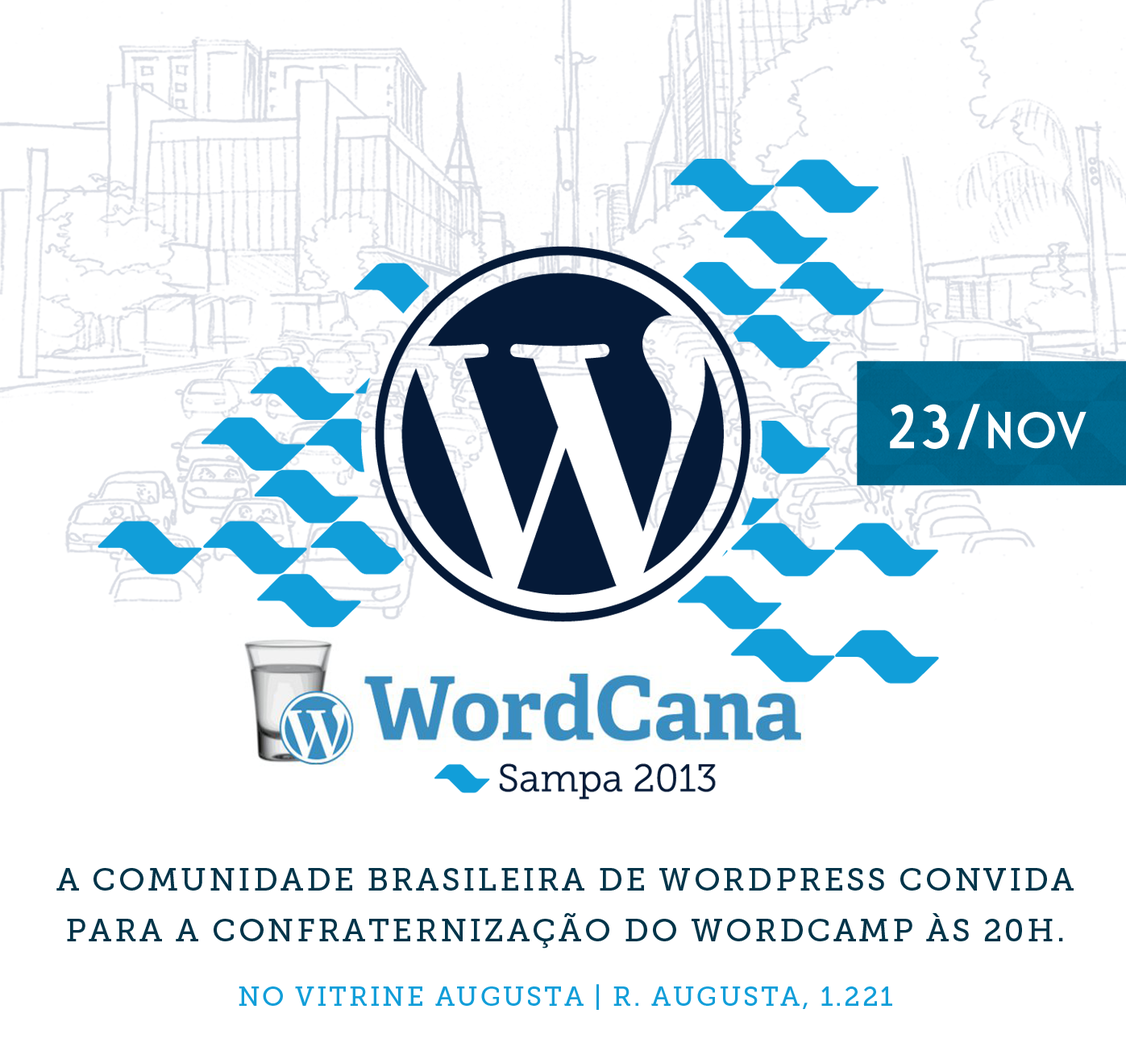
<style>
.page{position:relative;width:1126px;height:1059px;background:#ffffff}
.page>*{position:absolute;margin:0}
.t1{font:60.4px "MarketDeco";letter-spacing:0.025em;color:#ffffff}
.t2{font:50.4px "MarketDeco";letter-spacing:0.025em;color:#ffffff}
.t3{font:32px/50.6px "MuseoSlab-500";letter-spacing:0.08em;color:#003449;text-transform:uppercase}
.t4{font:26.9px "MuseoSlab-500";letter-spacing:0.08em;color:#119ed9;text-transform:uppercase}
</style>
<div class="page">
<p class="t1" style="left:890px;top:404px;width:196px;height:47px">23/<span class="t2">nov</span></p>
<p class="t3" style="left:56px;top:868px;width:1018px;height:81px;text-align:center">A Comunidade Brasileira de WordPress CONVIDA<br>PARA A CONFRATERNIZAÇÃO DO WORDCAMP ÀS 20H.</p>
<p class="t4" style="left:239px;top:984px;width:653px;height:26px">No VITRINE AUGUSTA | R. Augusta, 1.221</p>
</div>
